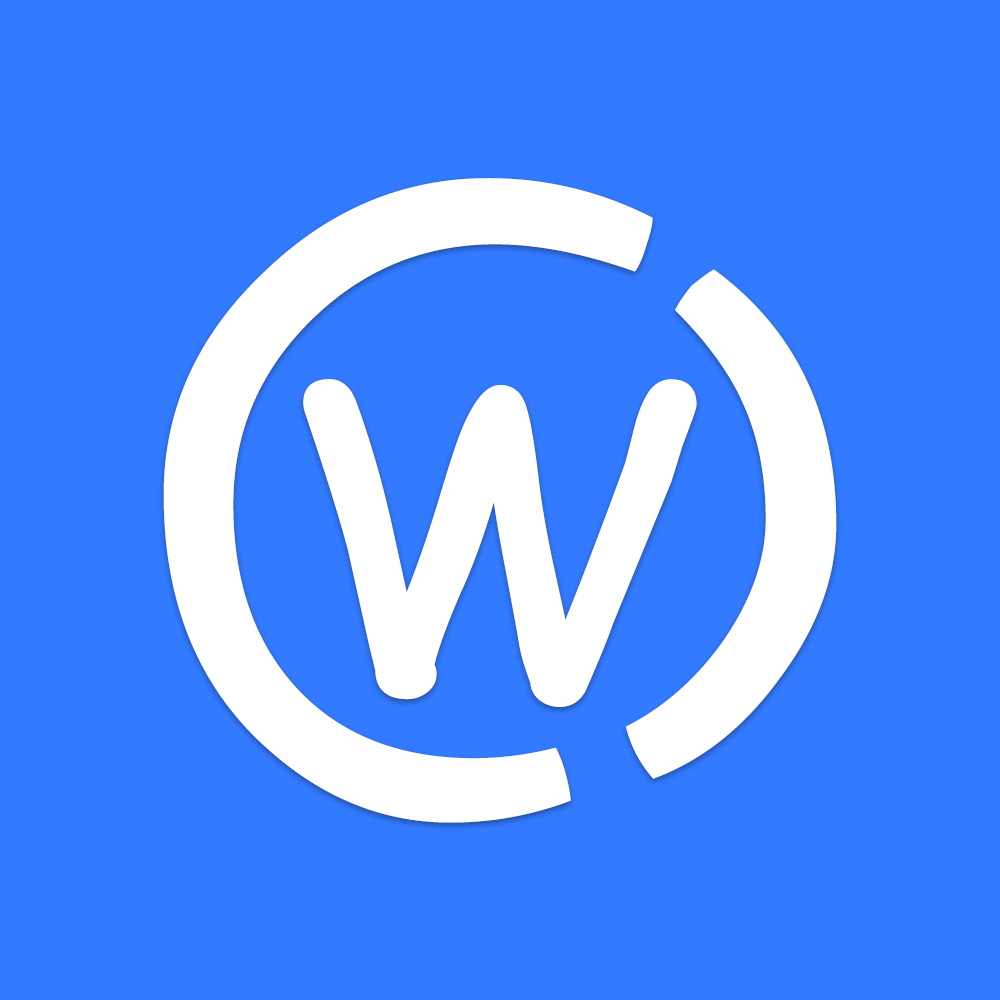
<style>
.page{position:relative;width:1000px;height:1000px;background:#327aff}
.page>*{position:absolute;margin:0}
.t1{font:900px "DFCraftYu-W5-WING-RKSJ-H";color:#ffffff}
.t2{font:400px "ComicSansMS";color:#ffffff;font-weight:bold}
</style>
<div class="page">
<p class="t1" style="left:163px;top:178px;width:674px;height:645px">O</p>
<p class="t2" style="left:303px;top:379px;width:394px;height:328px">W</p>
</div>
